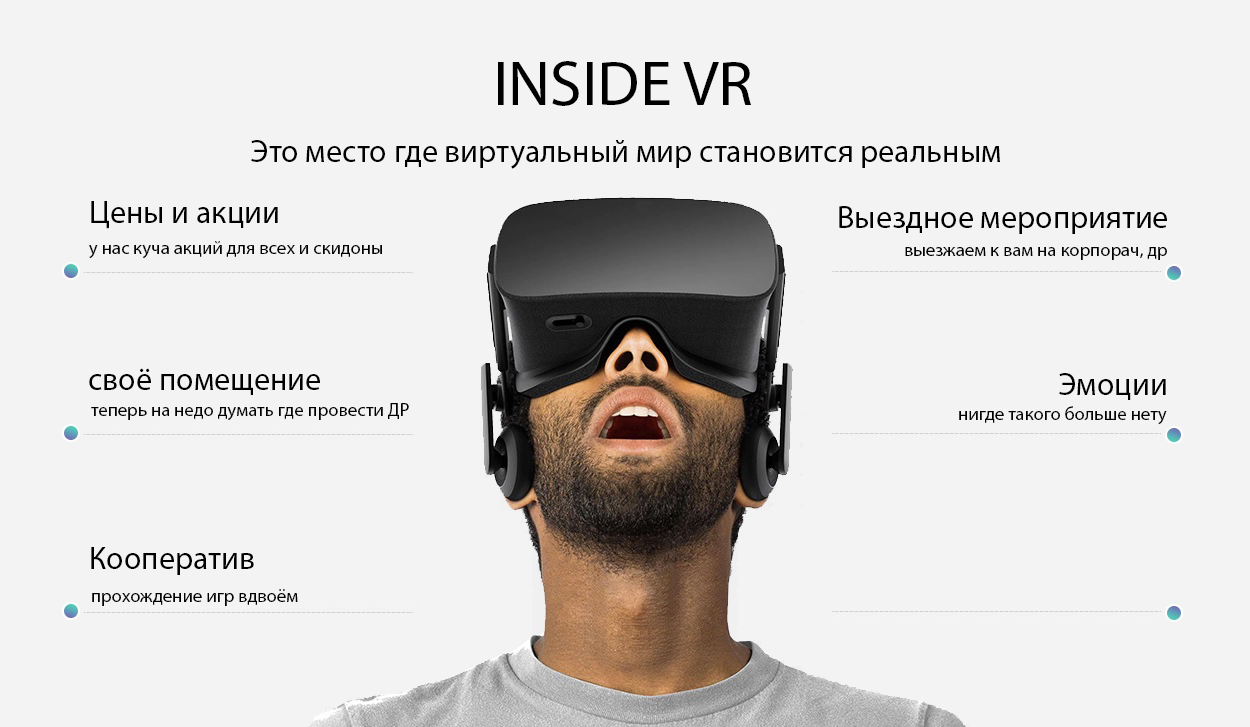
<style>
.page{position:relative;width:1250px;height:727px;background:#f3f3f3}
.page>*{position:absolute;margin:0}
.t1{font:64px "MyriadPro-Regular";color:#000000}
.t2{font:32px "MyriadPro-Regular";color:#000000}
.t3{font:18.7px "MyriadPro-Regular";color:#000000}
</style>
<div class="page">
<p class="t1" style="left:498px;top:61px;width:254px;height:45px">INSIDE VR</p>
<p class="t2" style="left:251px;top:140px;width:749px;height:29px">Это место где виртуальный мир становится реальным</p>
<p class="t2" style="left:91px;top:201px;width:187px;height:28px">Цены и акции</p>
<p class="t2" style="left:839px;top:206px;width:328px;height:28px">Выездное мероприятие</p>
<p class="t3" style="left:89px;top:241px;width:293px;height:18px">у нас куча акций для всех и скидоны</p>
<p class="t3" style="left:905px;top:247px;width:262px;height:13px">выезжаем к вам на корпорач, др</p>
<p class="t2" style="left:89px;top:368px;width:231px;height:27px">своё помещение</p>
<p class="t2" style="left:1059px;top:373px;width:107px;height:27px">Эмоции</p>
<p class="t3" style="left:91px;top:403px;width:318px;height:18px">теперь на недо думать где провести ДР</p>
<p class="t3" style="left:959px;top:406px;width:208px;height:19px">нигде такого больше нету</p>
<p class="t2" style="left:91px;top:547px;width:163px;height:28px">Кооператив</p>
<p class="t3" style="left:92px;top:589px;width:206px;height:17px">прохождение игр вдвоём</p>
</div>
